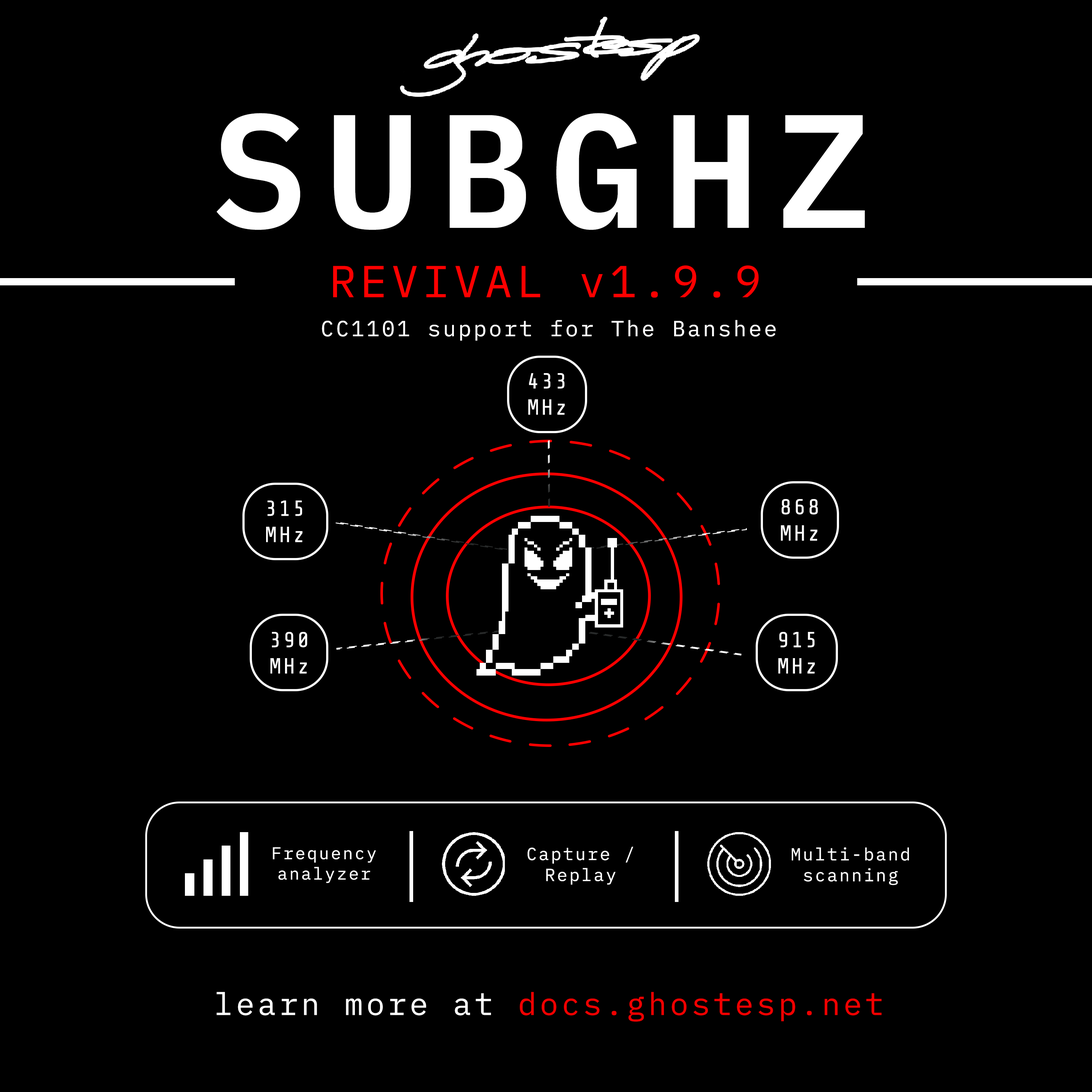
<style>
.page{position:relative;width:1092px;height:1092px;background:#000000}
.page>*{position:absolute;margin:0}
.t1{font:161.3px "IBMPlexMono-SemiBold";letter-spacing:0.1em;color:#ffffff}
.t2{font:44.6px "IBMPlexMono-Regular";letter-spacing:0.1em;color:#ff0000}
.t3{font:21.8px "IBMPlexMono-Regular";letter-spacing:0.1em;color:#ffffff}
.t4{font:21.8px "ShareTechMono-Regular";letter-spacing:0.1em;color:#ffffff}
.t5{font:17px "IBMPlexMono-Regular";letter-spacing:0.1em;color:#ffffff}
.t6{font:17.5px "IBMPlexMono-Regular";letter-spacing:0.1em;color:#ffffff}
.t7{font:17.4px "IBMPlexMono-Regular";letter-spacing:0.1em;color:#ffffff}
.t8{font:31px "IBMPlexMono-Regular";letter-spacing:0.1em;color:#f10000}
.t9{font:31px "IBMPlexMono-Regular";letter-spacing:0.1em;color:#ffffff}
</style>
<div class="page">
<p class="t1" style="left:217px;top:113px;width:648px;height:117px">SUBGHZ</p>
<p class="t2" style="left:333px;top:265px;width:426px;height:33px">REVIVAL v1.9.9</p>
<p class="t3" style="left:322px;top:320px;width:454px;height:21px">CC1101 support for The Banshee</p>
<p class="t4" style="left:528px;top:373px;width:37px;height:42px;text-align:center">433<br>MHz</p>
<p class="t4" style="left:266px;top:500px;width:36px;height:42px;text-align:center">315<br>MHz</p>
<p class="t4" style="left:781px;top:499px;width:37px;height:42px;text-align:center">868<br>MHz</p>
<p class="t4" style="left:270px;top:632px;width:37px;height:42px;text-align:center">390<br>MHz</p>
<p class="t4" style="left:778px;top:632px;width:37px;height:42px;text-align:center">915<br>MHz</p>
<p class="t5" style="left:273px;top:847px;width:103px;height:36px;text-align:center">Frequency<br>analyzer</p>
<p class="t6" style="left:527px;top:847px;width:106px;height:38px;text-align:center">Capture /<br>Replay</p>
<p class="t7" style="left:792px;top:847px;width:117px;height:38px;text-align:center">Multi-band<br>scanning</p>
<p class="t8" style="left:217px;top:992px;width:665px;height:30px"><span class="t9">learn more at </span>docs.ghostesp.net</p>
</div>
